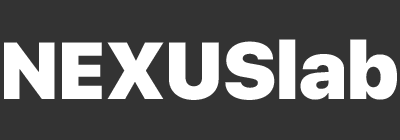
<style>
.page{position:relative;width:400px;height:140px;background:#333333}
.page>*{position:absolute;margin:0}
.t1{font:80.1px "SFUIDisplay-Black";color:#ffffff}
</style>
<div class="page">
<p class="t1" style="left:4px;top:39px;width:393px;height:61px">NEXUSlab</p>
</div>
